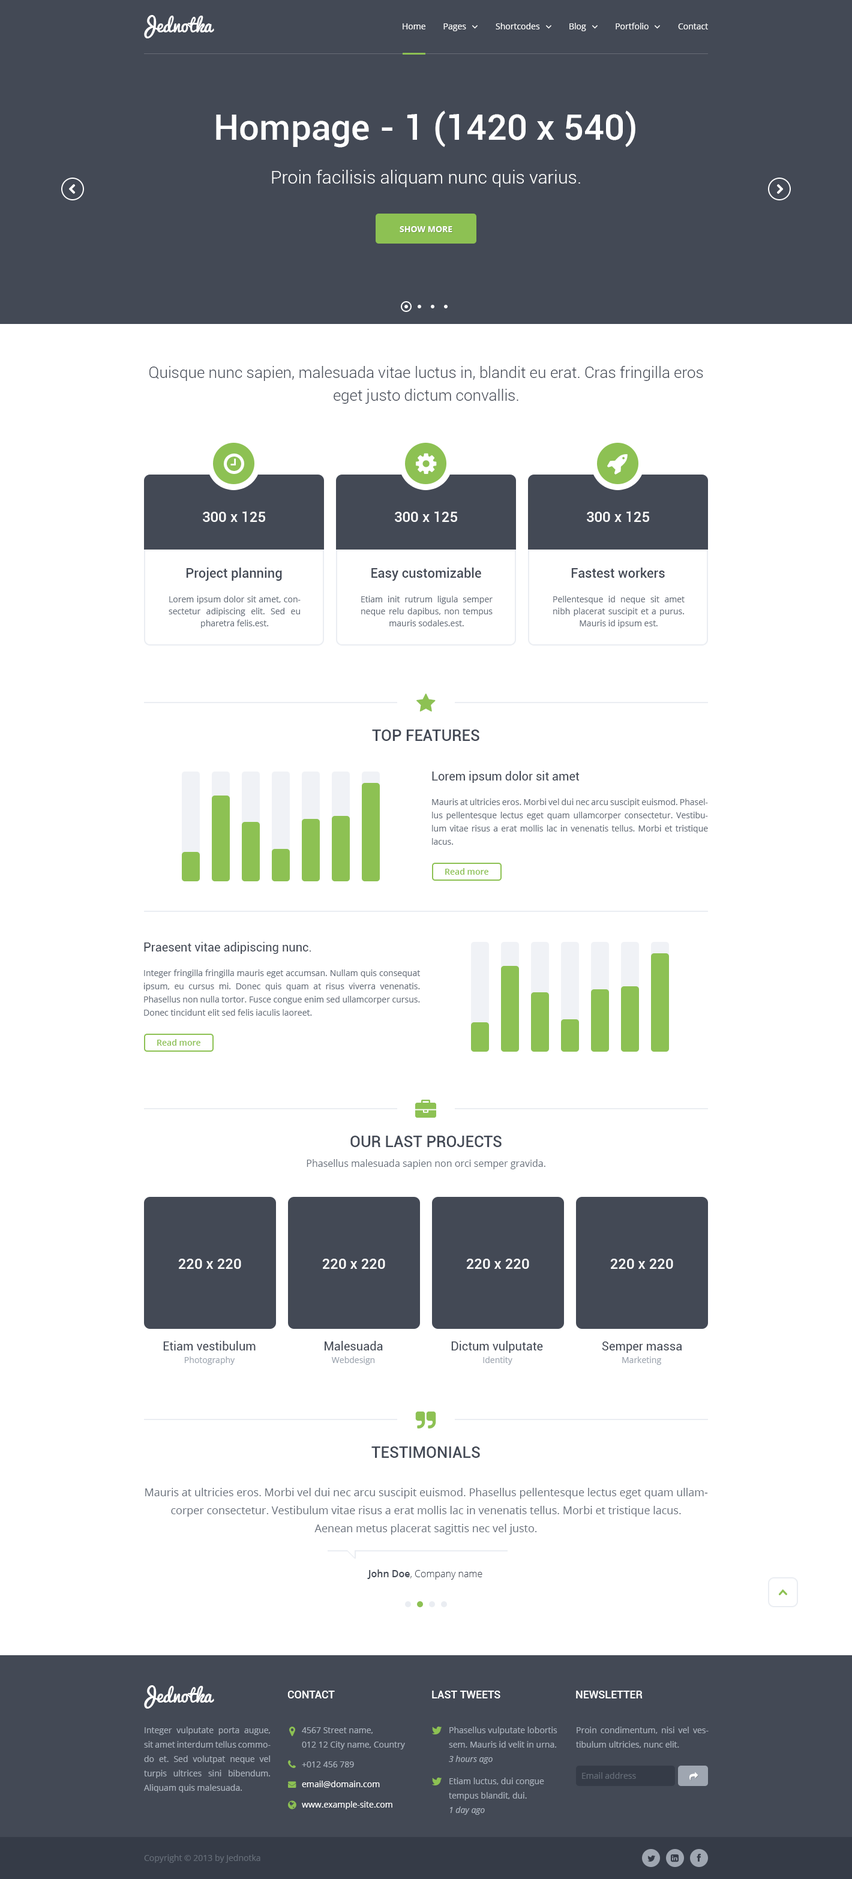
<style>
.page{position:relative;width:852px;height:1879px;background:#ffffff}
.page>*{position:absolute;margin:0}
.t1{font:18px "Pacifico";color:#ffffff}
.t2{font:8.4px "OpenSans";color:#ffffff}
.t3{font:36px "Roboto-Medium";color:#ffffff}
.t4{font:18px "Roboto-Light";color:#ffffff}
.t5{font:8.4px "OpenSans-Bold";color:#ffffff;text-transform:uppercase}
.t6{font:15.6px/22.8px "Roboto-Light";color:#434955}
.t7{font:14.4px "Roboto-Medium";color:#ffffff}
.t8{font:13.2px "Roboto-Medium";color:#434955}
.t9{font:8.4px/12px "OpenSans";color:#676f7a}
.t10{font:15.6px "Roboto-Medium";color:#434955;text-transform:uppercase}
.t11{font:12px "Roboto-Regular";color:#434955}
.t12{font:8.4px/13.2px "OpenSans";color:#676f7a}
.t13{font:8.4px "OpenSans-Semibold";color:#8dc153}
.t14{font:8.4px/14.4px "OpenSans";color:#676f7a}
.t15{font:9.6px "OpenSans";color:#676f7a}
.t16{font:8.4px "OpenSans";color:#9ca4af}
.t17{font:10.8px/18px "OpenSans";color:#676f7a}
.t18{font:9.6px "OpenSans-Light";color:#434955}
.t19{font:9.6px "OpenSans-Semibold";color:#434955}
.t20{font:10.8px "Roboto-Medium";color:#ffffff;text-transform:uppercase}
.t21{font:8.4px/14.4px "OpenSans";color:#aab2bd}
.t22{font:8.4px "OpenSans-Italic";color:#aab2bd}
.t23{font:8.4px "OpenSans";color:#aab2bd}
.t24{font:8.4px "OpenSans";color:#656d78}
</style>
<div class="page">
<p class="t1" style="left:144px;top:15px;width:70px;height:23px">Jednotka</p>
<p class="t2" style="left:403px;top:23px;width:22px;height:6px">Home</p>
<p class="t2" style="left:443px;top:23px;width:23px;height:8px">Pages</p>
<p class="t2" style="left:496px;top:23px;width:44px;height:6px">Shortcodes</p>
<p class="t2" style="left:569px;top:23px;width:17px;height:8px">Blog</p>
<p class="t2" style="left:616px;top:23px;width:33px;height:6px">Portfolio</p>
<p class="t2" style="left:678px;top:23px;width:30px;height:6px">Contact</p>
<p class="t3" style="left:216px;top:110px;width:419px;height:38px">Hompage - 1 (1420 x 540)</p>
<p class="t4" style="left:272px;top:170px;width:308px;height:17px">Proin facilisis aliquam nunc quis varius.</p>
<p class="t5" style="left:400px;top:226px;width:52px;height:6px">Show more</p>
<p class="t6" style="left:149px;top:366px;width:554px;height:38px;text-align:center">Quisque nunc sapien, malesuada vitae luctus in, blandit eu erat. Cras fringilla eros eget justo dictum convallis.</p>
<p class="t7" style="left:203px;top:511px;width:62px;height:11px">300 x 125</p>
<p class="t7" style="left:395px;top:511px;width:62px;height:11px">300 x 125</p>
<p class="t7" style="left:587px;top:511px;width:62px;height:11px">300 x 125</p>
<p class="t8" style="left:186px;top:568px;width:96px;height:13px">Project planning</p>
<p class="t8" style="left:371px;top:568px;width:110px;height:13px">Easy customizable</p>
<p class="t8" style="left:571px;top:568px;width:94px;height:10px">Fastest workers</p>
<p class="t9" style="left:169px;top:596px;width:132px;height:32px;text-align:justify">Lorem ipsum dolor sit amet, consectetur adipiscing elit. Sed eu pharetra felis.est.</p>
<p class="t9" style="left:361px;top:596px;width:132px;height:30px;text-align:justify">Etiam init rutrum ligula semper neque relu dapibus, non tempus mauris sodales.est.</p>
<p class="t9" style="left:553px;top:596px;width:132px;height:32px;text-align:justify">Pellentesque id neque sit amet nibh placerat suscipit et a purus. Mauris id ipsum est.</p>
<p class="t10" style="left:372px;top:730px;width:107px;height:11px">Top Features</p>
<p class="t11" style="left:432px;top:771px;width:148px;height:12px">Lorem ipsum dolor sit amet</p>
<p class="t12" style="left:432px;top:799px;width:276px;height:46px;text-align:justify">Mauris at ultricies eros. Morbi vel dui nec arcu suscipit euismod. Phasellus pellentesque lectus eget quam ullamcorper consectetur. Vestibulum vitae risus a erat mollis lac in venenatis tellus. Morbi et tristique lacus.</p>
<p class="t13" style="left:445px;top:868px;width:43px;height:7px">Read more</p>
<p class="t11" style="left:144px;top:942px;width:167px;height:12px">Praesent vitae adipiscing nunc.</p>
<p class="t12" style="left:144px;top:970px;width:276px;height:46px;text-align:justify"><span class="t14">I</span>nteger fringilla fringilla mauris eget accumsan. Nullam quis consequat ipsum, eu cursus mi. Donec quis quam at risus viverra venenatis. Phasellus non nulla tortor. Fusce congue enim sed ullamcorper cursus. Donec tincidunt elit sed felis iaculis laoreet.</p>
<p class="t13" style="left:157px;top:1039px;width:43px;height:7px">Read more</p>
<p class="t10" style="left:350px;top:1136px;width:152px;height:11px">Our last projects</p>
<p class="t15" style="left:307px;top:1159px;width:238px;height:10px">Phasellus malesuada sapien non orci semper gravida.</p>
<p class="t7" style="left:178px;top:1259px;width:63px;height:10px">220 x 220</p>
<p class="t7" style="left:322px;top:1259px;width:63px;height:10px">220 x 220</p>
<p class="t7" style="left:466px;top:1259px;width:63px;height:10px">220 x 220</p>
<p class="t7" style="left:610px;top:1259px;width:63px;height:10px">220 x 220</p>
<p class="t11" style="left:163px;top:1341px;width:93px;height:10px">Etiam vestibulum</p>
<p class="t11" style="left:325px;top:1341px;width:58px;height:10px">Malesuada</p>
<p class="t11" style="left:451px;top:1341px;width:92px;height:12px">Dictum vulputate</p>
<p class="t11" style="left:602px;top:1342px;width:80px;height:11px">Semper massa</p>
<p class="t16" style="left:185px;top:1357px;width:50px;height:8px">Photography</p>
<p class="t16" style="left:331px;top:1357px;width:44px;height:8px">Webdesign</p>
<p class="t16" style="left:483px;top:1357px;width:29px;height:8px">Identity</p>
<p class="t16" style="left:622px;top:1357px;width:39px;height:8px">Marketing</p>
<p class="t10" style="left:371px;top:1447px;width:109px;height:11px">Testimonials</p>
<p class="t17" style="left:145px;top:1488px;width:563px;height:47px;text-align:center">Mauris at ultricies eros. Morbi vel dui nec arcu suscipit euismod. Phasellus pellentesque lectus eget quam ullamcorper consectetur. Vestibulum vitae risus a erat mollis lac in venenatis tellus. Morbi et tristique lacus. <br>Aenean metus placerat sagittis nec vel justo.</p>
<p class="t18" style="left:367px;top:1570px;width:115px;height:10px"><span class="t19">John Doe</span>, Company name</p>
<p class="t1" style="left:144px;top:1685px;width:70px;height:24px">Jednotka</p>
<p class="t20" style="left:287px;top:1691px;width:48px;height:8px">CONTACT</p>
<p class="t20" style="left:432px;top:1691px;width:68px;height:8px">Last tweets</p>
<p class="t20" style="left:576px;top:1691px;width:67px;height:8px">Newsletter</p>
<p class="t21" style="left:144px;top:1727px;width:127px;height:66px;text-align:justify">Integer vulputate porta augue, sit amet interdum tellus commodo et. Sed volutpat neque vel turpis ultrices sini bibendum. Aliquam quis malesuada.</p>
<p class="t21" style="left:302px;top:1727px;width:103px;height:23px">4567 Street name, <br>012 12 City name, Country</p>
<p class="t21" style="left:449px;top:1727px;width:108px;height:21px">Phasellus vulputate lobortis sem. Mauris id velit in urna.</p>
<p class="t21" style="left:576px;top:1727px;width:133px;height:21px;text-align:justify">Proin condimentum, nisi vel vestibulum ultricies, nunc elit.</p>
<p class="t22" style="left:449px;top:1756px;width:44px;height:8px">3 hours ago</p>
<p class="t23" style="left:302px;top:1762px;width:52px;height:6px">+012 456 789</p>
<p class="t2" style="left:302px;top:1781px;width:78px;height:7px">email@domain.com</p>
<p class="t21" style="left:449px;top:1778px;width:95px;height:23px">Etiam luctus, dui congue tempus blandit, dui.</p>
<p class="t24" style="left:582px;top:1772px;width:54px;height:7px">Email address</p>
<p class="t2" style="left:302px;top:1801px;width:90px;height:9px">www.example-site.com</p>
<p class="t22" style="left:450px;top:1807px;width:35px;height:8px">1 day ago</p>
<p class="t24" style="left:144px;top:1855px;width:116px;height:8px">Copyright © 2013 by Jednotka</p>
</div>
